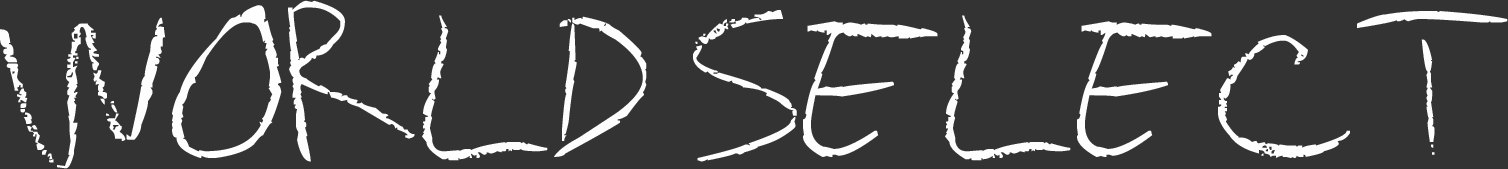
<style>
.page{position:relative;width:1508px;height:169px;background:#333333}
.page>*{position:absolute;margin:0}
.t1{font:100px "chalkboard";color:#fefefe}
</style>
<div class="page">
<p class="t1" style="left:0px;top:0px;width:1508px;height:169px">WORLD SELECT</p>
</div>
